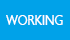
<style>
.page{position:relative;width:70px;height:40px;background:#00a2e9}
.page>*{position:absolute;margin:0}
.t1{font:13.9px "Humanist521BT-Roman";color:#ffffff;scale:0.88 1}
</style>
<div class="page">
<p class="t1" style="left:6px;top:15px;width:57px;height:10px">WORKING</p>
</div>
